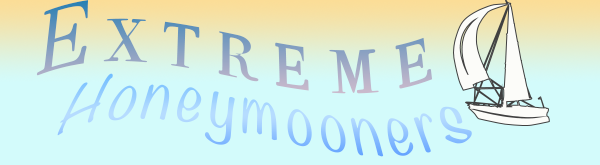
<style>
.page{position:relative;width:600px;height:165px;background:#d3fbfb}
.page>*{position:absolute;margin:0}
.t1{font:88.8px "BodoniSvtyTwoSCITCTT-Book";letter-spacing:0.2em}
.t2{font:59.9px "Noteworthy-Light";letter-spacing:0.1em}
</style>
<div class="page">
<p class="t1" style="left:36px;top:0px;width:397px;height:94px">Extreme</p>
<p class="t2" style="left:57px;top:73px;width:415px;height:84px">Honeymooners</p>
</div>
